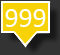
<style>
.page{position:relative;width:60px;height:55px;background:#f7d207}
.page>*{position:absolute;margin:0}
.t1{font:28px "Calibri";color:#fefefe}
</style>
<div class="page">
<p class="t1" style="left:5px;top:9px;width:41px;height:18px">999</p>
</div>
